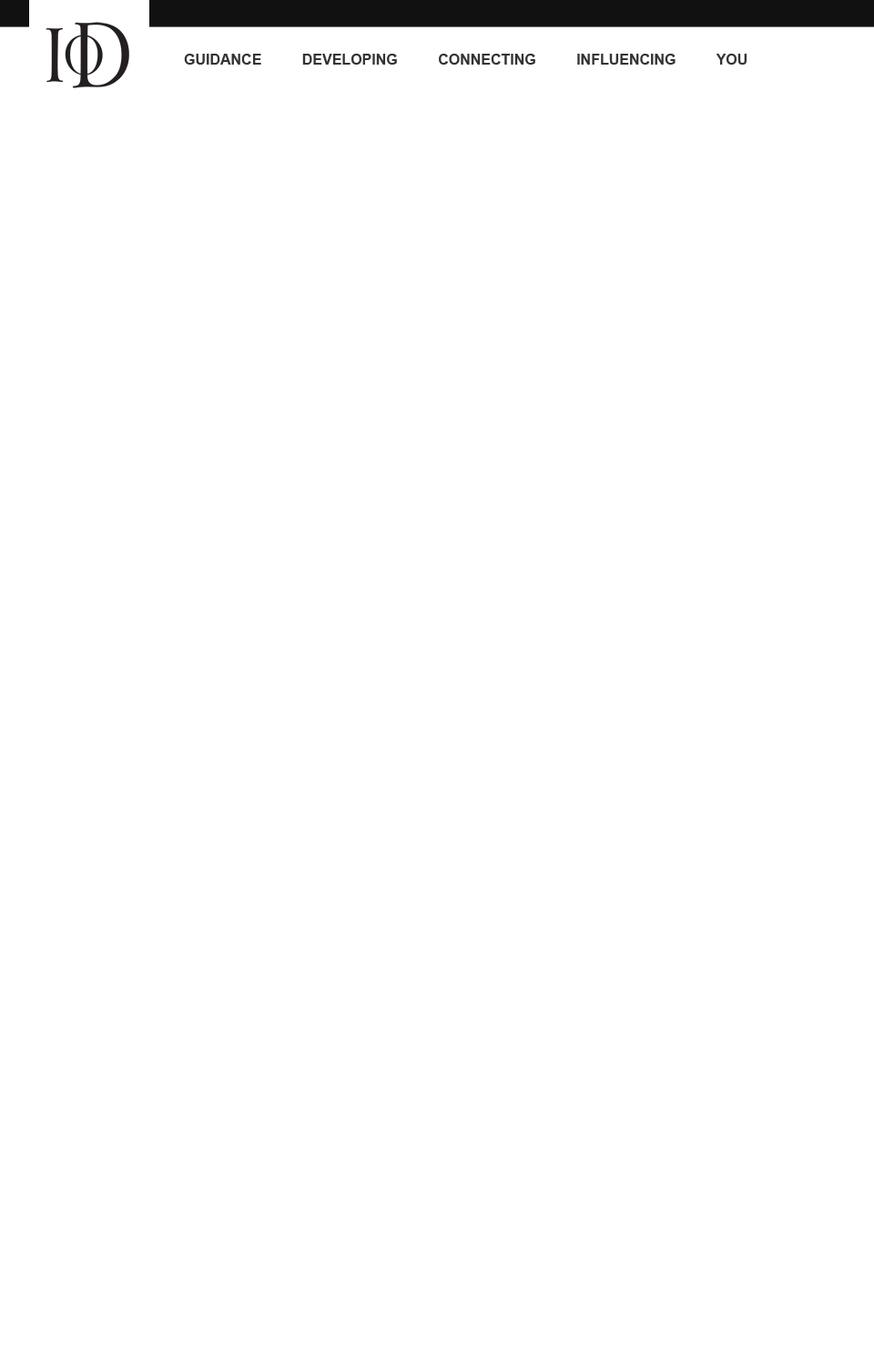
<style>
.page{position:relative;width:874px;height:1365px;background:#ffffff}
.page>*{position:absolute;margin:0}
.t1{font:14.6px "Arial-BoldMT";color:#333333}
</style>
<div class="page">
<p class="t1" style="left:184px;top:54px;width:563px;height:11px">GUIDANCE          DEVELOPING          CONNECTING          INFLUENCING          YOU</p>
</div>
